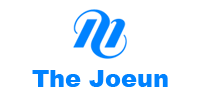
<style>
.page{position:relative;width:200px;height:100px;background:#ffffff}
.page>*{position:absolute;margin:0}
.t1{font:24px "Arial-Black";color:#0082ff}
</style>
<div class="page">
<p class="t1" style="left:32px;top:70px;width:136px;height:17px">The Joeun</p>
</div>
